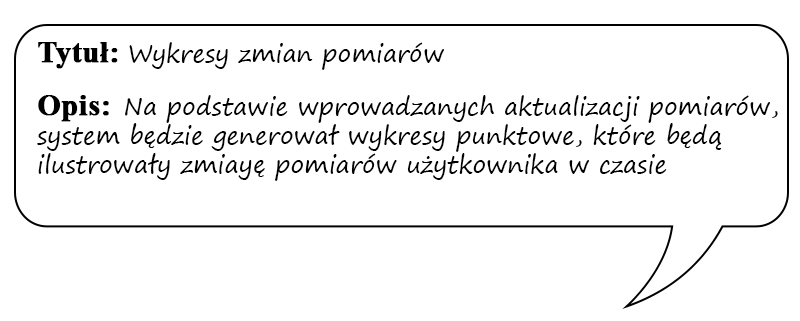
<style>
.page{position:relative;width:800px;height:321px;background:#ffffff}
.page>*{position:absolute;margin:0}
.t1{font:24px "SegoePrint";color:#000000}
.t2{font:30px "TimesNewRomanPS-BoldMT";color:#000000;font-weight:bold}
</style>
<div class="page">
<p class="t1" style="left:37px;top:42px;width:741px;height:139px"><span class="t2">Tytuł: </span>Wykresy zmian pomiarów<br><br><span class="t2">Opis:  </span>Na podstawie wprowadzanych aktualizacji pomiarów, system będzie generował wykresy punktowe, które będą ilustrowały zmiayę pomiarów użytkownika w czasie</p>
</div>
